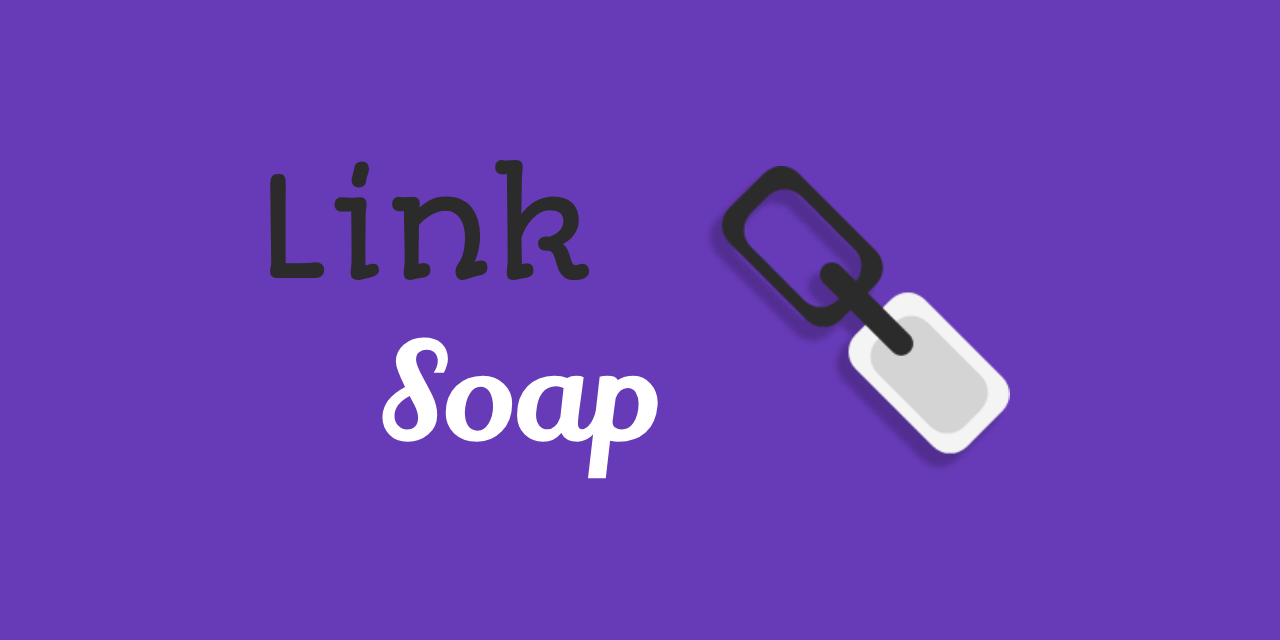
<style>
.page{position:relative;width:1280px;height:640px;background:#673ab7}
.page>*{position:absolute;margin:0}
.t1{font:135.6px "AutourOne-Regular";color:#2b2b2b}
.t2{font:135.6px "LilyScriptOne-Regular";color:#ffffff}
</style>
<div class="page">
<p class="t1" style="left:270px;top:160px;width:388px;height:319px">Link<br>    <span class="t2">Soap</span></p>
</div>
